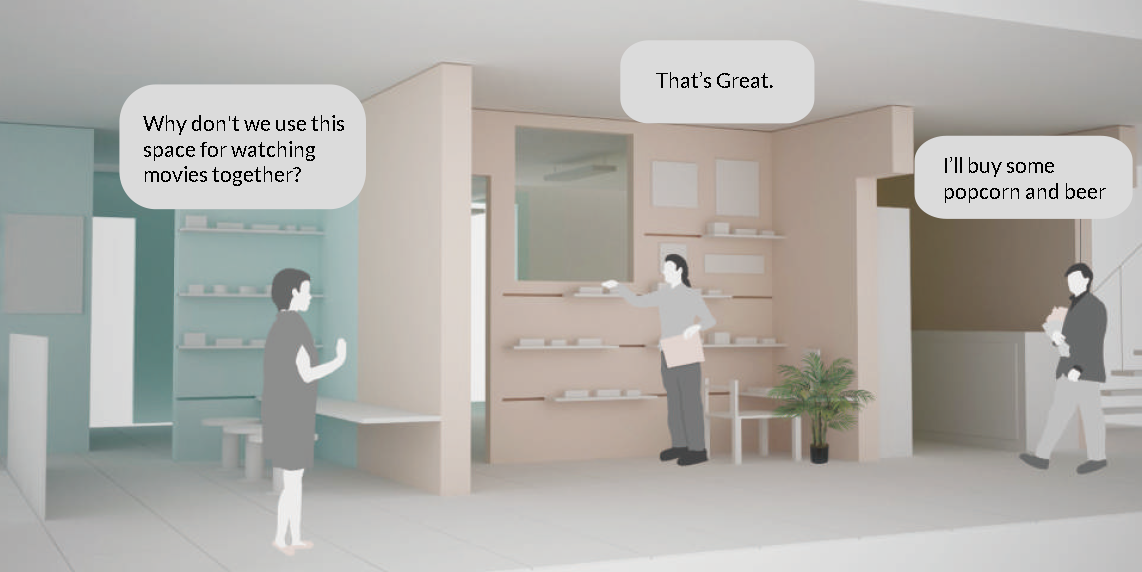
<style>
.page{position:relative;width:1142px;height:572px}
.page>*{position:absolute;margin:0}
.t1{font:21.3px "Lato-Regular";color:#000000}
</style>
<div class="page">
<p class="t1" style="left:656px;top:72px;width:117px;height:16px">That’s Great.</p>
<p class="t1" style="left:143px;top:115px;width:201px;height:71px">Why don't we use this<br>space for watching<br>movies together?</p>
<p class="t1" style="left:945px;top:157px;width:161px;height:46px">I’ll buy some<br>popcorn and beer</p>
</div>
